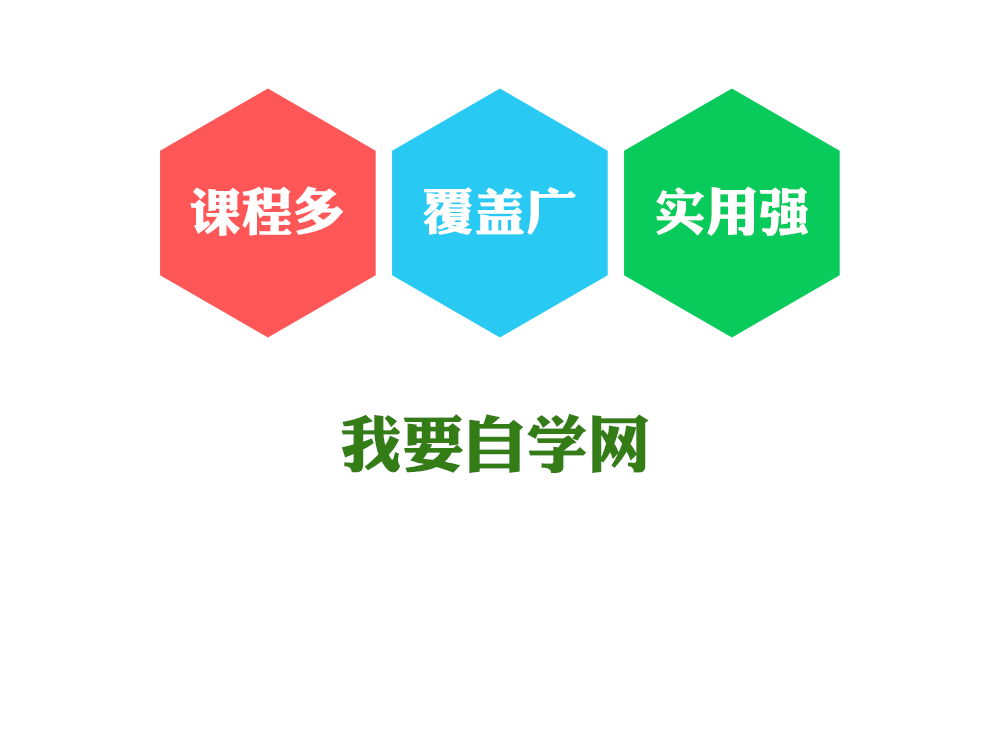
<style>
.page{position:relative;width:1000px;height:750px;background:#ffffff}
.page>*{position:absolute;margin:0}
.t1{font:52px "DFLiJinHeiW8";color:#ffffff}
.t2{font:62px "DFLiJinHeiW8";color:#337c16}
</style>
<div class="page">
<p class="t1" style="left:190px;top:186px;width:154px;height:50px">课程多</p>
<p class="t1" style="left:423px;top:187px;width:153px;height:48px">覆盖广</p>
<p class="t1" style="left:656px;top:186px;width:152px;height:50px">实用强</p>
<p class="t2" style="left:341px;top:413px;width:308px;height:60px">我要自学网</p>
</div>
